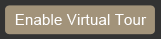
<style>
.page{position:relative;width:161px;height:39px;background:#a2937a}
.page>*{position:absolute;margin:0}
.t1{font:15px "ArialMT";letter-spacing:0.01em;color:#ffffff}
</style>
<div class="page">
<p class="t1" style="left:15px;top:14px;width:132px;height:11px">Enable Virtual Tour</p>
</div>
